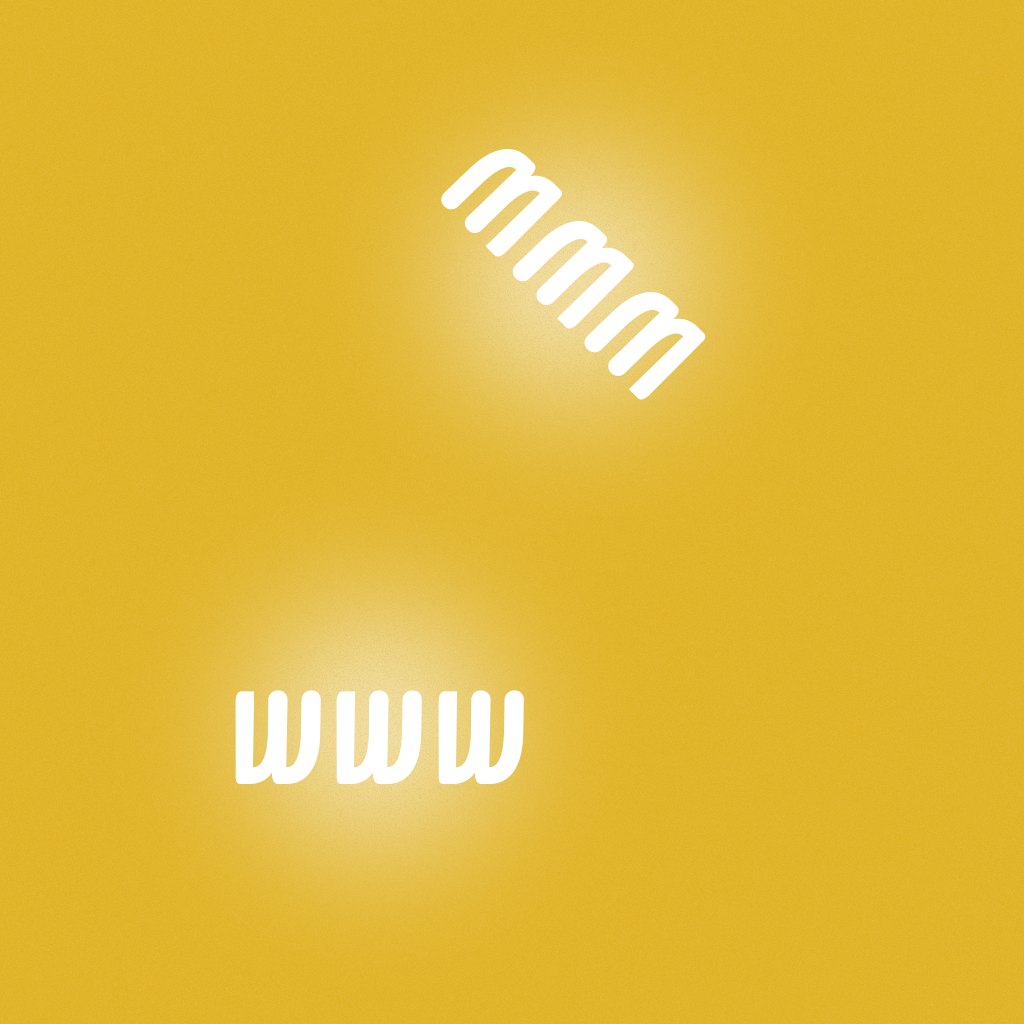
<style>
.page{position:relative;width:1024px;height:1024px}
.page>*{position:absolute;margin:0}
.t1{font:161px "Epitough";color:#ffffff}
</style>
<div class="page">
<p class="t1" style="left:441px;top:149px;width:265px;height:251px;rotate:-135deg">www</p>
<p class="t1" style="left:235px;top:690px;width:289px;height:94px">www</p>
</div>
